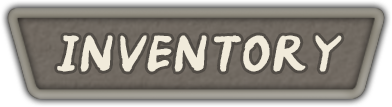
<style>
.page{position:relative;width:392px;height:107px}
.page>*{position:absolute;margin:0}
.t1{font:52.1px "SangSangFlowerRoad";letter-spacing:0.075em;color:#f1ebdb;text-transform:uppercase;font-weight:bold;font-style:italic}
</style>
<div class="page">
<p class="t1" style="left:57px;top:35px;width:285px;height:37px">INVENTORY</p>
</div>
